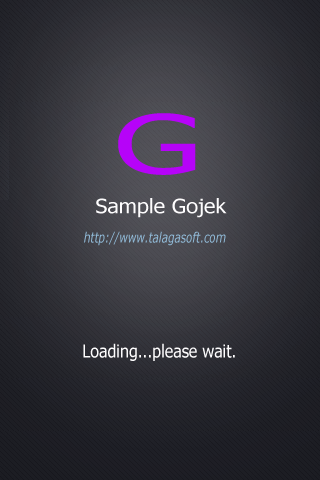
<style>
.page{position:relative;width:320px;height:480px}
.page>*{position:absolute;margin:0}
.t1{font:81.3px "Tahoma";color:#b603f8;scale:1.61 1}
.t2{font:20.1px "Tahoma";color:#fefdfe;scale:1.07 1}
.t3{font:14px "Verdana-Italic";color:#90b9d6;scale:0.74 1}
.t4{font:18px "Tahoma";color:#fefdfe;scale:0.89 1}
</style>
<div class="page">
<p class="t1" style="left:118px;top:113px;width:78px;height:62px">G</p>
<p class="t2" style="left:96px;top:198px;width:131px;height:20px">Sample Gojek</p>
<p class="t3" style="left:84px;top:231px;width:142px;height:15px">http://www.talagasoft.com</p>
<p class="t4" style="left:83px;top:343px;width:152px;height:18px">Loading...please wait.</p>
</div>
